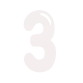
<style>
.page{position:relative;width:83px;height:83px;background:#ffffff}
.page>*{position:absolute;margin:0}
.t1{font:68px "KoreanAKARU-R";color:#f4eeee;font-variant:small-caps;scale:0.8 1}
</style>
<div class="page">
<p class="t1" style="left:23px;top:10px;width:33px;height:63px">3</p>
</div>
